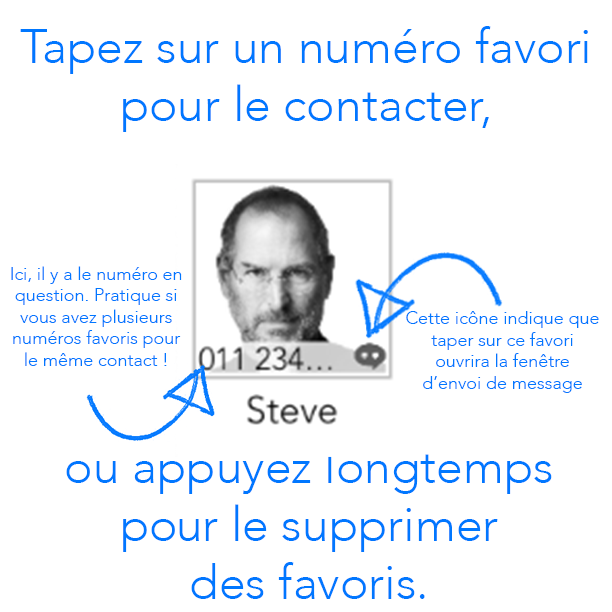
<style>
.page{position:relative;width:612px;height:612px;background:#ffffff}
.page>*{position:absolute;margin:0}
.t1{font:48px "Avenir-Light";color:#0077ff}
.t2{font:18px "Avenir-Light";color:#0077ff}
</style>
<div class="page">
<p class="t1" style="left:20px;top:26px;width:568px;height:106px;text-align:center">Tapez sur un numéro favori pour le contacter,</p>
<p class="t2" style="left:11px;top:266px;width:171px;height:100px;text-align:center">Ici, il y a le numéro en question. Pratique si vous avez plusieurs numéros favoris pour<br>le même contact !</p>
<p class="t2" style="left:406px;top:311px;width:193px;height:82px;text-align:center">Cette icône indique que taper sur ce favori<br>ouvrira la fenêtre<br>d’envoi de message</p>
<p class="t1" style="left:66px;top:446px;width:486px;height:153px;text-align:center">ou appuyez longtemps<br>pour le supprimer<br>des favoris.</p>
</div>
